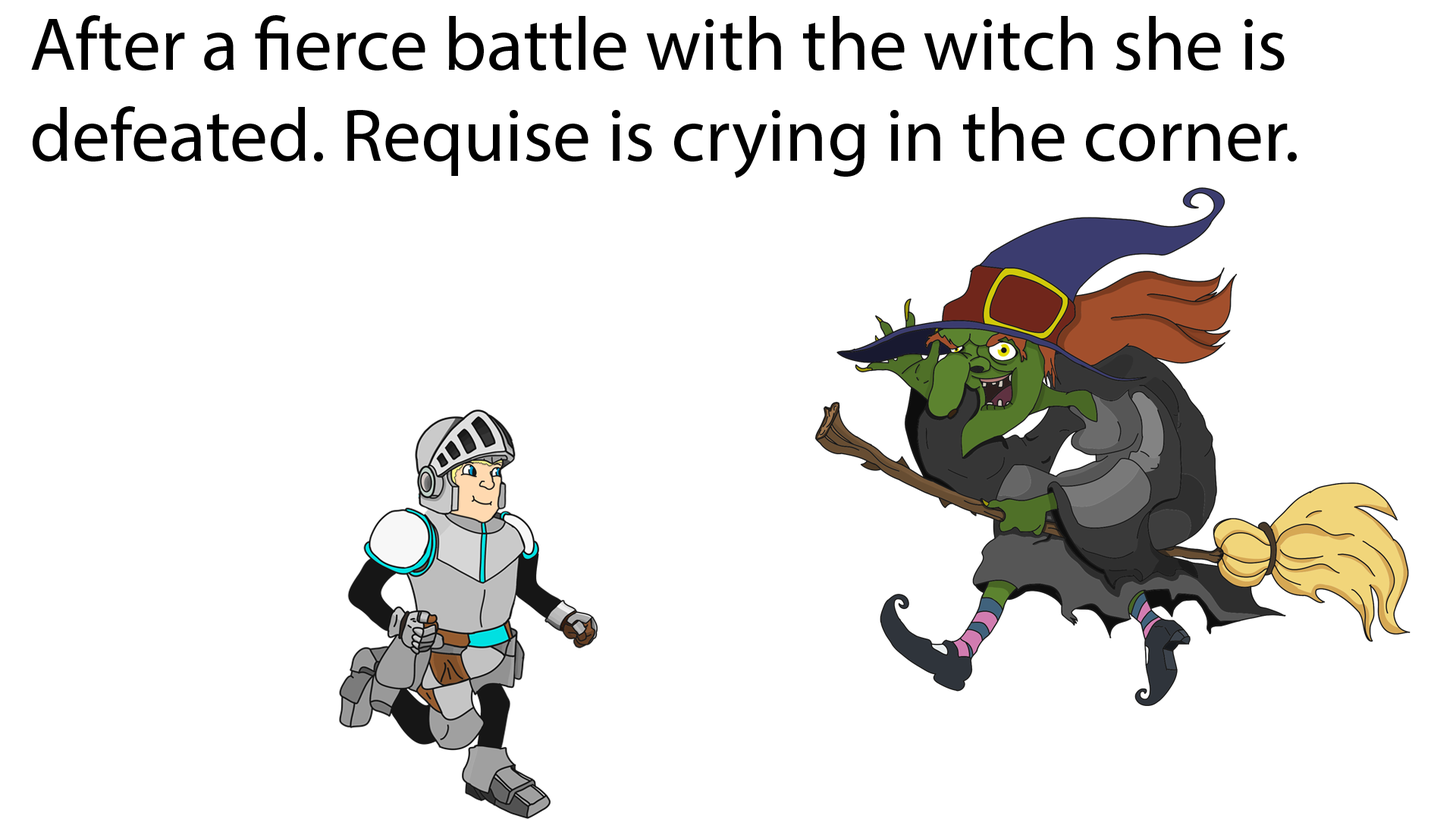
<style>
.page{position:relative;width:1456px;height:819px;background:#ffffff}
.page>*{position:absolute;margin:0}
.t1{font:75.8px "MyriadPro-Regular";color:#000000}
</style>
<div class="page">
<p class="t1" style="left:31px;top:15px;width:1266px;height:163px">After a fierce battle with the witch she is defeated. Requise is crying in the corner.</p>
</div>
